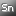
<style>
.page{position:relative;width:16px;height:16px}
.page>*{position:absolute;margin:0}
.t1{font:9px "Tahoma";color:#ffffff;scale:1.11 1}
</style>
<div class="page">
<p class="t1" style="left:2px;top:4px;width:11px;height:7px">Sn</p>
</div>
